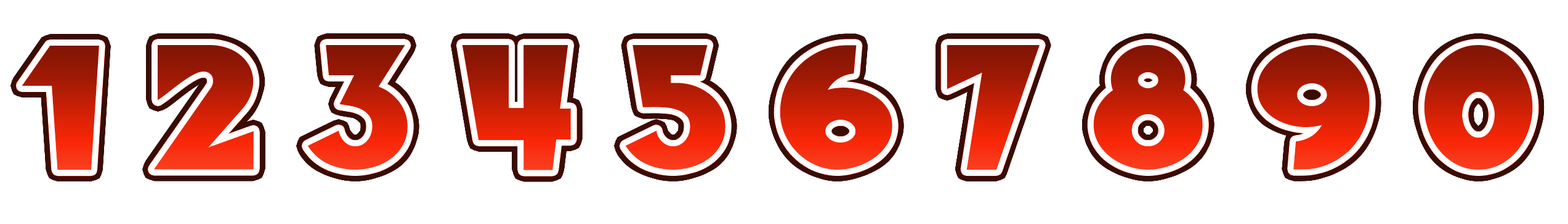
<style>
.page{position:relative;width:1568px;height:224px;background:#ffffff}
.page>*{position:absolute;margin:0}
.t1{font:162.3px "BlitzkriegNF"}
</style>
<div class="page">
<p class="t1" style="left:22px;top:44px;width:1511px;height:126px">1 2 3 4 5 6 7 8 9 0</p>
</div>
